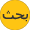
<style>
.page{position:relative;width:30px;height:30px;background:#fec513}
.page>*{position:absolute;margin:0}
.t1{font:14px "Tahoma";color:#333333}
</style>
<div class="page">
<p class="t1" style="left:2px;top:10px;width:26px;height:12px">بحث</p>
</div>
